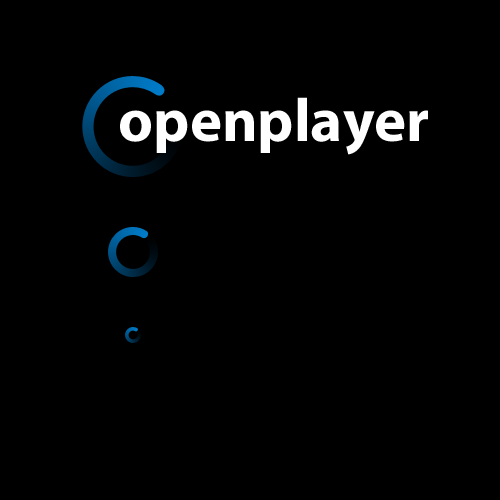
<style>
.page{position:relative;width:500px;height:500px;background:#000000}
.page>*{position:absolute;margin:0}
.t1{font:60.8px "MyriadPro-Bold";color:#ffffff}
</style>
<div class="page">
<p class="t1" style="left:120px;top:97px;width:308px;height:58px">openplayer</p>
</div>
